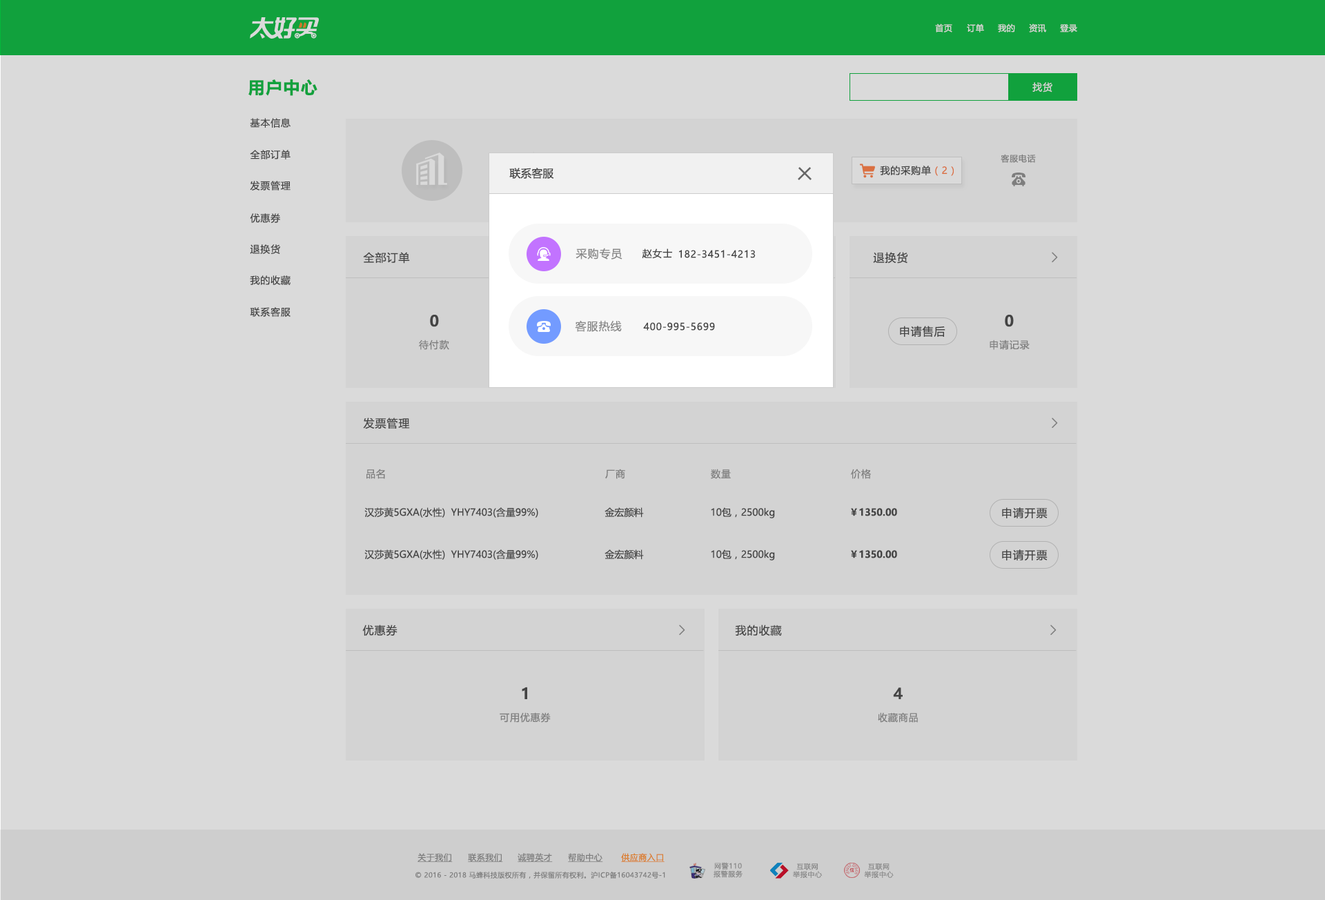
<style>
.page{position:relative;width:1325px;height:900px;background:#dadada}
.page>*{position:absolute;margin:0}
.t1{font:8.3px "MicrosoftYaHeiUI";letter-spacing:0.04em;color:#dadada}
.t2{font:16.6px "MicrosoftYaHeiUI-Bold";letter-spacing:0.06em;color:#04b83b}
.t3{font:9.7px "MicrosoftYaHei";letter-spacing:0.06em;color:#d3d3d3}
.t4{font:9.6px "MicrosoftYaHeiUI";letter-spacing:0.06em;color:#444444}
.t5{font:8.3px "MicrosoftYaHeiUI";letter-spacing:0.06em;color:#888888}
.t6{font:11px "MicrosoftYaHeiUI";color:#444444}
.t7{font:9.7px "MicrosoftYaHeiUI";letter-spacing:0.06em;color:#444444}
.t8{font:9.7px "MicrosoftYaHeiUI";letter-spacing:0.06em;color:#ff7b41}
.t9{font:11px "MicrosoftYaHeiUI";letter-spacing:0.06em;color:#444444}
.t10{font:11px "MicrosoftYaHeiUI";letter-spacing:0.06em;color:#888888}
.t11{font:13.8px "FangSong";color:#8c8c8c;font-weight:bold}
.t12{font:15.2px "MicrosoftYaHeiUI-Bold";letter-spacing:0.06em;color:#444444}
.t13{font:9.7px "MicrosoftYaHeiUI";letter-spacing:0.06em;color:#8c8c8c}
.t14{font:9.7px "MicrosoftYaHeiUI";color:#444444}
.t15{font:9.7px "MicrosoftYaHeiUI-Bold";color:#444444}
.t16{font:8.3px "MicrosoftYaHeiUI";letter-spacing:0.04em;color:#8c8c8c;text-decoration:underline}
.t17{font:8.3px "MicrosoftYaHeiUI";letter-spacing:0.04em;color:#da7d2b;text-decoration:underline}
.t18{font:6.9px/8px "MicrosoftYaHei";letter-spacing:0.06em;color:#999999}
.t19{font:6.9px "MicrosoftYaHeiUI";letter-spacing:0.04em;color:#8c8c8c}
</style>
<div class="page">
<p class="t1" style="left:935px;top:23px;width:17px;height:9px">首页</p>
<p class="t1" style="left:967px;top:23px;width:17px;height:9px">订单</p>
<p class="t1" style="left:998px;top:23px;width:17px;height:9px">我的</p>
<p class="t1" style="left:1029px;top:23px;width:17px;height:9px">资讯</p>
<p class="t1" style="left:1060px;top:24px;width:17px;height:8px">登录</p>
<p class="t2" style="left:248px;top:79px;width:69px;height:17px">用户中心</p>
<p class="t3" style="left:1032px;top:82px;width:20px;height:10px">找货</p>
<p class="t4" style="left:250px;top:118px;width:41px;height:10px">基本信息</p>
<p class="t4" style="left:250px;top:150px;width:41px;height:9px">全部订单</p>
<p class="t5" style="left:1001px;top:154px;width:35px;height:9px">客服电话</p>
<p class="t6" style="left:509px;top:168px;width:45px;height:11px">联系客服</p>
<p class="t7" style="left:880px;top:166px;width:74px;height:10px">我的采购单<span class="t8">（2）</span></p>
<p class="t4" style="left:250px;top:181px;width:41px;height:9px">发票管理</p>
<p class="t4" style="left:250px;top:213px;width:30px;height:10px">优惠券</p>
<p class="t4" style="left:250px;top:244px;width:30px;height:10px">退换货</p>
<p class="t9" style="left:363px;top:252px;width:47px;height:12px">全部订单</p>
<p class="t10" style="left:576px;top:248px;width:46px;height:11px">采购专员</p>
<p class="t7" style="left:642px;top:248px;width:30px;height:11px">赵女士</p>
<p class="t7" style="left:679px;top:250px;width:77px;height:8px">182-3451-4213</p>
<p class="t9" style="left:873px;top:252px;width:35px;height:12px">退换货</p>
<p class="t11" style="left:1052px;top:252px;width:6px;height:10px;rotate:180deg">&lt;</p>
<p class="t4" style="left:250px;top:275px;width:41px;height:10px">我的收藏</p>
<p class="t4" style="left:250px;top:307px;width:41px;height:10px">联系客服</p>
<p class="t12" style="left:430px;top:315px;width:9px;height:12px">0</p>
<p class="t12" style="left:1005px;top:315px;width:9px;height:12px">0</p>
<p class="t10" style="left:575px;top:320px;width:47px;height:12px">客服热线</p>
<p class="t7" style="left:643px;top:322px;width:72px;height:9px">400-995-5699</p>
<p class="t9" style="left:900px;top:326px;width:45px;height:11px">申请售后</p>
<p class="t13" style="left:419px;top:340px;width:30px;height:10px">待付款</p>
<p class="t13" style="left:990px;top:340px;width:40px;height:10px">申请记录</p>
<p class="t9" style="left:363px;top:418px;width:47px;height:11px">发票管理</p>
<p class="t11" style="left:1052px;top:418px;width:6px;height:10px;rotate:180deg">&lt;</p>
<p class="t13" style="left:366px;top:469px;width:19px;height:10px">品名</p>
<p class="t13" style="left:605px;top:469px;width:20px;height:10px">厂商</p>
<p class="t13" style="left:711px;top:469px;width:20px;height:10px">数量</p>
<p class="t13" style="left:851px;top:469px;width:20px;height:10px">价格</p>
<p class="t14" style="left:364px;top:507px;width:174px;height:11px">汉莎黄5GXA(水性)  YHY7403(含量99%)</p>
<p class="t14" style="left:605px;top:507px;width:39px;height:11px">金宏颜料</p>
<p class="t14" style="left:711px;top:507px;width:64px;height:11px">10包，2500kg</p>
<p class="t15" style="left:851px;top:508px;width:46px;height:8px">￥1350.00</p>
<p class="t9" style="left:1002px;top:507px;width:46px;height:12px">申请开票</p>
<p class="t14" style="left:364px;top:549px;width:174px;height:11px">汉莎黄5GXA(水性)  YHY7403(含量99%)</p>
<p class="t14" style="left:605px;top:549px;width:39px;height:11px">金宏颜料</p>
<p class="t14" style="left:711px;top:549px;width:64px;height:11px">10包，2500kg</p>
<p class="t15" style="left:851px;top:550px;width:46px;height:8px">￥1350.00</p>
<p class="t9" style="left:1002px;top:549px;width:46px;height:12px">申请开票</p>
<p class="t9" style="left:362px;top:625px;width:36px;height:11px">优惠券</p>
<p class="t11" style="left:679px;top:625px;width:6px;height:10px;rotate:180deg">&lt;</p>
<p class="t9" style="left:735px;top:625px;width:47px;height:11px">我的收藏</p>
<p class="t11" style="left:1050px;top:625px;width:7px;height:10px;rotate:180deg">&lt;</p>
<p class="t12" style="left:522px;top:687px;width:5px;height:12px">1</p>
<p class="t12" style="left:893px;top:687px;width:10px;height:12px">4</p>
<p class="t13" style="left:500px;top:712px;width:51px;height:11px">可用优惠券</p>
<p class="t13" style="left:878px;top:712px;width:40px;height:11px">收藏商品</p>
<p class="t16" style="left:418px;top:853px;width:35px;height:9px">关于我们</p>
<p class="t16" style="left:468px;top:853px;width:35px;height:9px">联系我们</p>
<p class="t16" style="left:518px;top:853px;width:35px;height:9px">诚聘英才</p>
<p class="t16" style="left:568px;top:853px;width:35px;height:9px">帮助中心</p>
<p class="t17" style="left:621px;top:853px;width:44px;height:9px">供应商入口</p>
<p class="t18" style="left:714px;top:862px;width:29px;height:16px;text-align:center">网警110<br>报警服务</p>
<p class="t18" style="left:793px;top:863px;width:29px;height:15px;text-align:center">互联网<br>举报中心</p>
<p class="t18" style="left:864px;top:863px;width:30px;height:15px;text-align:center">互联网<br>举报中心</p>
<p class="t19" style="left:415px;top:871px;width:250px;height:8px">© 2016 - 2018 马蜂科技版权所有，并保留所有权利。沪ICP备16043742号-1</p>
</div>
